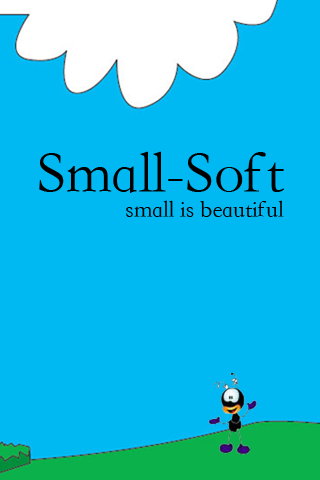
<style>
.page{position:relative;width:320px;height:480px;background:#00b9f2}
.page>*{position:absolute;margin:0}
.t1{font:60px "STFangsong";color:#000000}
.t2{font:24px "STFangsong";color:#000000}
</style>
<div class="page">
<p class="t1" style="left:39px;top:151px;width:245px;height:42px">Small-Soft</p>
<p class="t2" style="left:126px;top:200px;width:158px;height:17px">small is beautiful</p>
</div>
